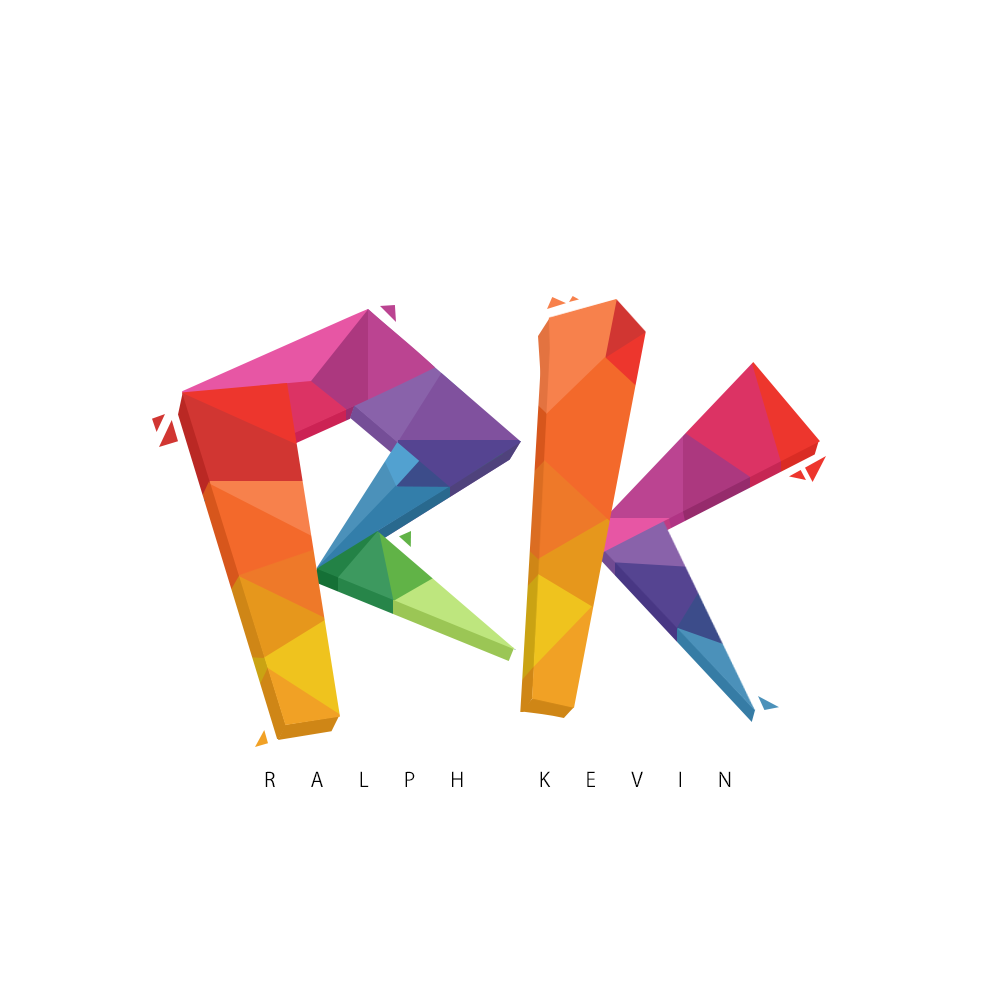
<style>
.page{position:relative;width:1000px;height:1000px;background:#ffffff}
.page>*{position:absolute;margin:0}
.t1{font:20px "KozGoPr6N-Regular";letter-spacing:1.75em;color:#000000}
</style>
<div class="page">
<p class="t1" style="left:265px;top:771px;width:466px;height:16px">RALPH KEVIN</p>
</div>
